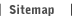
<style>
.page{position:relative;width:72px;height:20px;background:#ffffff}
.page>*{position:absolute;margin:0}
.t1{font:12px "BellGothicBT-Black";letter-spacing:0.02em}
.t2{font:12px "BellGothicBT-Black";letter-spacing:0.02em;color:#4c4c4c}
</style>
<div class="page">
<p class="t1" style="left:0px;top:3px;width:1px;height:13px">|</p>
<p class="t2" style="left:9px;top:4px;width:45px;height:12px">Sitemap</p>
<p class="t1" style="left:71px;top:3px;width:2px;height:13px">|</p>
</div>
